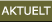
<style>
.page{position:relative;width:52px;height:22px;background:#666632}
.page>*{position:absolute;margin:0}
.t1{font:11px "Verdana";color:#fefefd}
</style>
<div class="page">
<p class="t1" style="left:1px;top:6px;width:50px;height:9px">AKTUELT</p>
</div>
